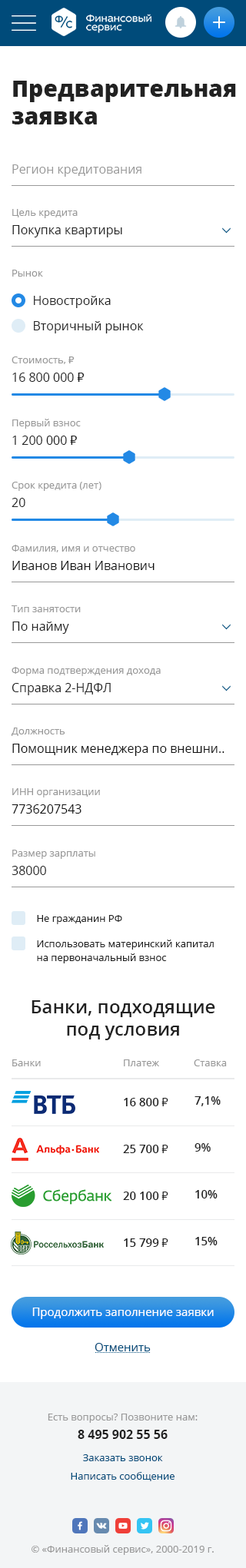
<style>
.page{position:relative;width:246px;height:1568px;background:#ffffff}
.page>*{position:absolute;margin:0}
.t1{font:23px "OpenSans-Extrabold";color:#222222}
.t2{font:12.3px "OpenSans";color:#999999}
.t3{font:10px "OpenSans";color:#999999}
.t4{font:12.3px/18.4px "OpenSans";color:#222222}
.t5{font:12.3px "OpenSans";color:#222222}
.t6{font:10px "Tahoma";color:#999999}
.t7{font:12.3px/18.4px "Tahoma";color:#222222}
.t8{font:12.3px/18.4px "OpenSans";color:#111111}
.t9{font:10px "OpenSans";color:#222222}
.t10{font:10px/13.8px "OpenSans";color:#222222}
.t11{font:18.4px "OpenSans-Semibold";color:#222222}
.t12{font:11.5px "OpenSans-Semibold";color:#222222}
.t13{font:11.5px "Tahoma";color:#222222}
.t14{font:11.5px "OpenSans";color:#ffffff}
.t15{font:11.5px "OpenSans";color:#004b7a}
.t16{font:10px/18.4px "OpenSans";color:#999999}
.t17{font:12.3px/18.4px "OpenSans-Bold";color:#222222}
.t18{font:10px/18.4px "OpenSans";color:#004b7a}
</style>
<div class="page">
<p class="t1" style="left:12px;top:81px;width:224px;height:43px">Предварительная заявка</p>
<p class="t2" style="left:12px;top:164px;width:129px;height:13px"><span class="t3"> <br></span>Регион кредитования</p>
<p class="t4" style="left:12px;top:209px;width:110px;height:28px"><span class="t3">Цель кредита<br></span>Покупка квартиры</p>
<p class="t3" style="left:12px;top:270px;width:31px;height:7px">Рынок</p>
<p class="t5" style="left:34px;top:296px;width:77px;height:12px">Новостройка</p>
<p class="t5" style="left:34px;top:321px;width:110px;height:12px">Вторичный рынок</p>
<p class="t3" style="left:12px;top:356px;width:73px;height:26px">Стоимость, <span class="t6">₽<br></span><span class="t4">16 800 000 </span><span class="t7">₽</span></p>
<p class="t3" style="left:12px;top:419px;width:69px;height:26px">Первый взнос <br><span class="t4">1 200 000 </span><span class="t7">₽</span></p>
<p class="t3" style="left:12px;top:482px;width:89px;height:25px">Срок кредита (лет)<br><span class="t4">20</span></p>
<p class="t3" style="left:12px;top:545px;width:142px;height:25px">Фамилия, имя и отчество<br><span class="t8">Иванов Иван Иванович</span></p>
<p class="t3" style="left:12px;top:605px;width:69px;height:29px">Тип занятости<br><span class="t4">По найму</span></p>
<p class="t3" style="left:12px;top:667px;width:149px;height:28px">Форма подтверждения дохода<br><span class="t4">Справка 2-НДФЛ</span></p>
<p class="t8" style="left:12px;top:728px;width:212px;height:28px"><span class="t3">Должность<br></span>Помощник менеджера по внешни..</p>
<p class="t3" style="left:12px;top:788px;width:88px;height:26px">ИНН организации<br><span class="t8">7736207543</span></p>
<p class="t3" style="left:12px;top:850px;width:83px;height:25px">Размер зарплаты<br><span class="t4">38000</span></p>
<p class="t9" style="left:37px;top:915px;width:85px;height:9px">Не гражданин РФ</p>
<p class="t10" style="left:37px;top:940px;width:177px;height:23px">Использовать материнский капитал на первоначальный взнос</p>
<p class="t11" style="left:31px;top:1000px;width:184px;height:40px;text-align:center">Банки, подходящие под условия</p>
<p class="t3" style="left:12px;top:1059px;width:29px;height:7px">Банки</p>
<p class="t3" style="left:124px;top:1059px;width:35px;height:7px">Платеж</p>
<p class="t3" style="left:194px;top:1059px;width:33px;height:7px">Ставка</p>
<p class="t12" style="left:124px;top:1098px;width:44px;height:8px">16 800 <span class="t13">₽</span></p>
<p class="t12" style="left:194px;top:1096px;width:26px;height:10px">7,1%</p>
<p class="t12" style="left:123px;top:1145px;width:45px;height:8px">25 700 <span class="t13">₽</span></p>
<p class="t12" style="left:194px;top:1143px;width:17px;height:9px">9%</p>
<p class="t12" style="left:123px;top:1192px;width:45px;height:8px">20 100 <span class="t13">₽</span></p>
<p class="t12" style="left:195px;top:1190px;width:22px;height:8px">10%</p>
<p class="t12" style="left:124px;top:1238px;width:44px;height:9px">15 799 <span class="t13">₽</span></p>
<p class="t12" style="left:195px;top:1237px;width:22px;height:8px">15%</p>
<p class="t14" style="left:32px;top:1308px;width:182px;height:11px">Продолжить заполнение заявки</p>
<p class="t15" style="left:94px;top:1343px;width:57px;height:8px">Отменить</p>
<p class="t16" style="left:48px;top:1414px;width:149px;height:25px;text-align:center">Есть вопросы? Позвоните нам:<br><span class="t17">8 495 902 55 56</span></p>
<p class="t18" style="left:71px;top:1454px;width:103px;height:27px;text-align:center">Заказать звонок          <br>Написать сообщение</p>
<p class="t3" style="left:31px;top:1545px;width:183px;height:10px">© «Финансовый сервис», 2000-2019 г.</p>
</div>
